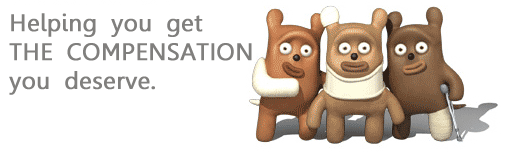
<style>
.page{position:relative;width:506px;height:152px;background:#ffffff}
.page>*{position:absolute;margin:0}
.t1{font:24px "Leelawadee";color:#807f7d;font-weight:bold}
</style>
<div class="page">
<p class="t1" style="left:9px;top:13px;width:243px;height:82px">Helping you get THE COMPENSATION you deserve.</p>
</div>
